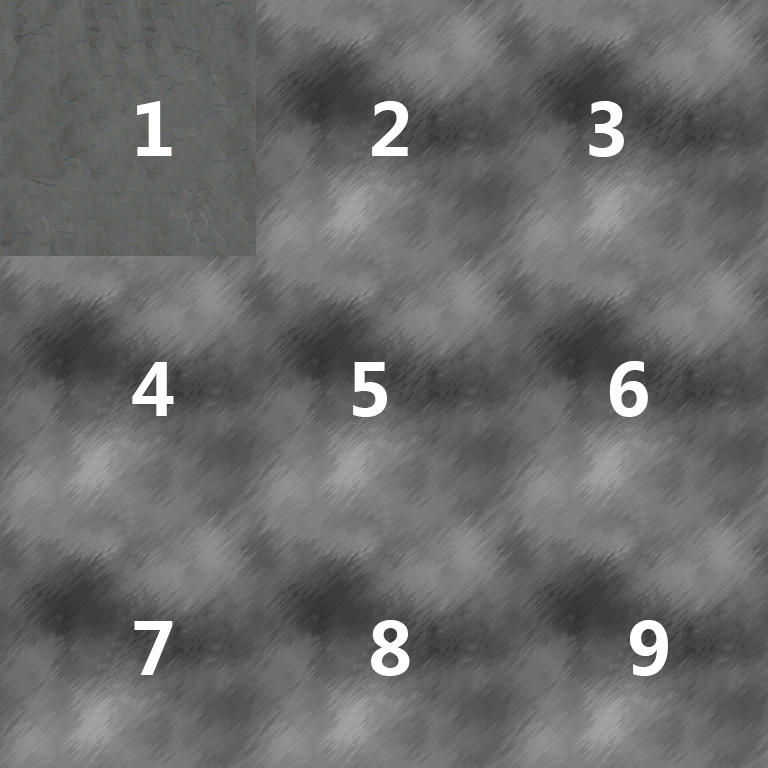
<style>
.page{position:relative;width:768px;height:768px}
.page>*{position:absolute;margin:0}
.t1{font:72px "MicrosoftYaHei-Bold";color:#ffffff}
</style>
<div class="page">
<p class="t1" style="left:132px;top:101px;width:536px;height:575px">1         2        3<br><br><br>4        5          6<br><br><br>7         8          9</p>
</div>
